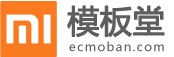
<style>
.page{position:relative;width:174px;height:57px;background:#ffffff}
.page>*{position:absolute;margin:0}
.t1{font:31.9px "MicrosoftYaHei";color:#5e5e5e;font-weight:bold}
.t2{font:12px "MicrosoftYaHei";letter-spacing:0.12em;color:#5e5e5e}
</style>
<div class="page">
<p class="t1" style="left:67px;top:5px;width:98px;height:33px">模板堂</p>
<p class="t2" style="left:69px;top:41px;width:95px;height:11px">ecmoban.com</p>
</div>
